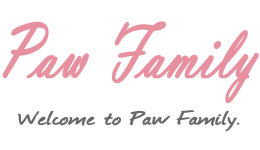
<style>
.page{position:relative;width:260px;height:150px;background:#ffffff}
.page>*{position:absolute;margin:0}
.t1{font:79.8px "VladimirScript";color:#e791a0;font-weight:bold;scale:0.71 1}
.t2{font:21.6px "Journal";color:#696969;font-weight:bold;scale:1.5 1}
</style>
<div class="page">
<p class="t1" style="left:2px;top:21px;width:257px;height:83px">Paw Family</p>
<p class="t2" style="left:18px;top:110px;width:222px;height:22px">Welcome to Paw Family.</p>
</div>
